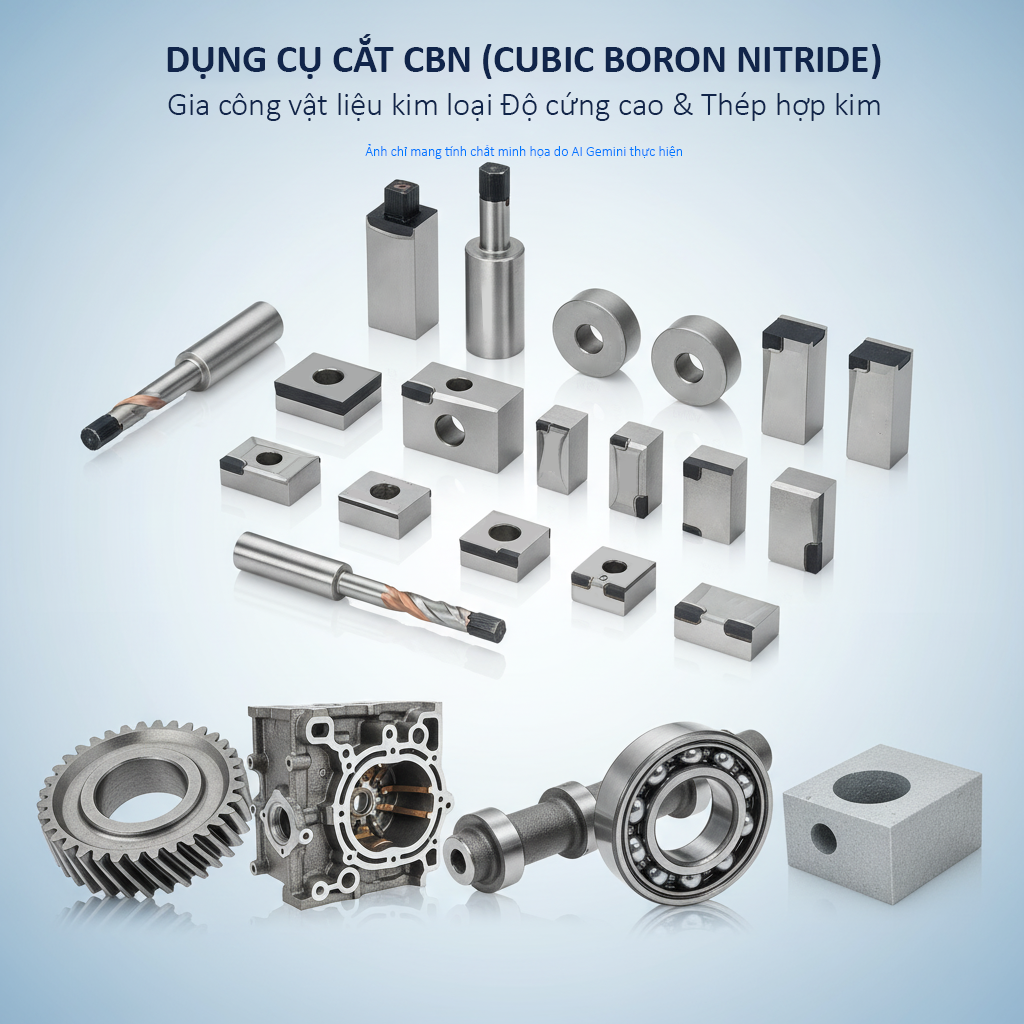
<style>
.page{position:relative;width:1024px;height:1024px}
.page>*{position:absolute;margin:0}
.t1{font:39.7px "Calibri-Bold";color:#11254a}
.t2{font:32.8px "Calibri-Light";color:#11254a}
.t3{font:14px "Calibri-Light";color:#0078ff}
</style>
<div class="page">
<p class="t1" style="left:167px;top:34px;width:714px;height:45px">DỤNG CỤ CẮT CBN (CUBIC BORON NITRIDE)</p>
<p class="t2" style="left:168px;top:92px;width:712px;height:29px">Gia công vật liệu kim loại Độ cứng cao &amp; Thép hợp kim</p>
<p class="t3" style="left:365px;top:144px;width:317px;height:15px">Ảnh chỉ mang tính chất minh họa do AI Gemini thực hiện</p>
</div>
